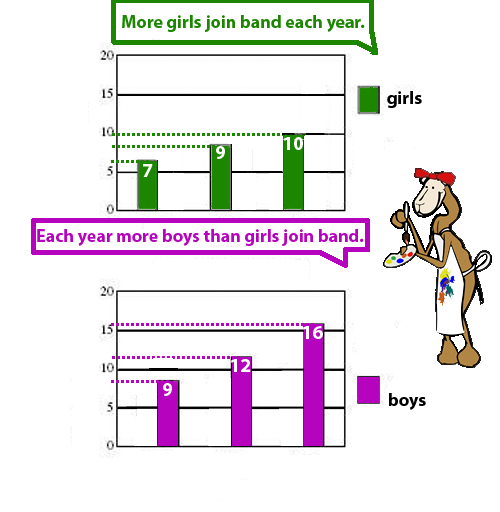
<style>
.page{position:relative;width:500px;height:512px;background:#ffffff}
.page>*{position:absolute;margin:0}
.t1{font:18px "MyriadPro-Bold";color:#1c8601}
.t2{font:18px "MyriadPro-Bold";color:#000000}
.t3{font:20px "MyriadPro-Bold";color:#ffffff}
.t4{font:18px "MyriadPro-Bold";color:#b603bd}
</style>
<div class="page">
<p class="t1" style="left:122px;top:15px;width:243px;height:17px">More girls join band each year.</p>
<p class="t2" style="left:387px;top:91px;width:35px;height:17px">girls</p>
<p class="t3" style="left:284px;top:137px;width:19px;height:13px">10</p>
<p class="t3" style="left:216px;top:146px;width:9px;height:13px">9</p>
<p class="t3" style="left:143px;top:164px;width:10px;height:13px">7</p>
<p class="t4" style="left:37px;top:229px;width:327px;height:17px">Each year more boys than girls join band.</p>
<p class="t3" style="left:303px;top:326px;width:20px;height:13px">16</p>
<p class="t3" style="left:231px;top:359px;width:20px;height:13px">12</p>
<p class="t3" style="left:163px;top:383px;width:9px;height:13px">9</p>
<p class="t2" style="left:389px;top:393px;width:37px;height:17px">boys</p>
</div>
